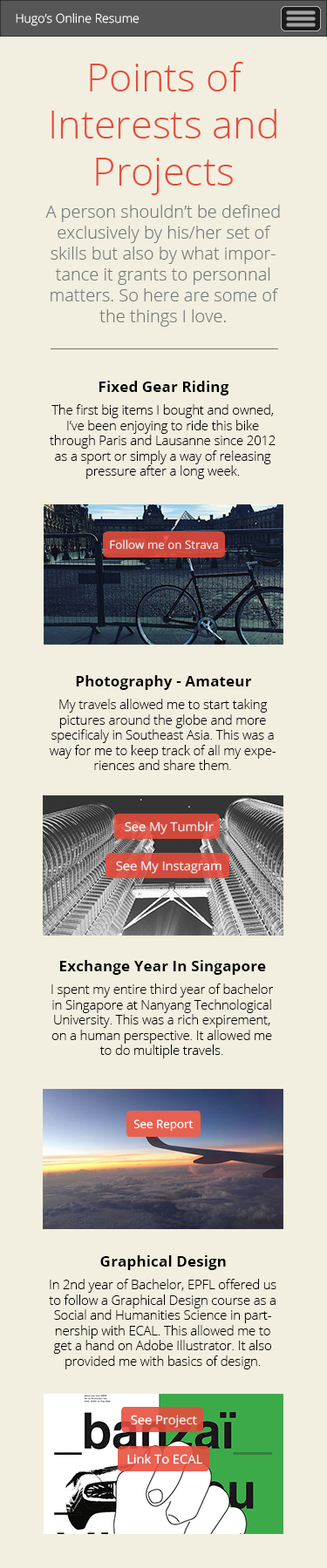
<style>
.page{position:relative;width:327px;height:1568px;background:#f2efe0}
.page>*{position:absolute;margin:0}
.t1{font:12.3px "OpenSans-Light";color:#ffffff}
.t2{font:39.2px "OpenSans-Light";color:#e74c3c}
.t3{font:17.4px "OpenSans-Light";color:#727878}
.t4{font:15.1px "OpenSans-Bold";color:#000000}
.t5{font:12.7px "OpenSans-Light";color:#000000}
.t6{font:11.4px "OpenSans";color:#e4e7ea}
.t7{font:12.2px "OpenSans";color:#e6e6e6;scale:1.05 1}
.t8{font:12.2px "OpenSans";color:#ffffff;scale:1.05 1}
.t9{font:11.4px "OpenSans";color:#ffffff}
</style>
<div class="page">
<p class="t1" style="left:16px;top:13px;width:123px;height:13px">Hugo’s Online Resume</p>
<p class="t2" style="left:51px;top:62px;width:225px;height:133px;text-align:center">Points of <br>Interests and Projects</p>
<p class="t3" style="left:45px;top:205px;width:235px;height:122px;text-align:center">A person shouldn’t be defined exclusively by his/her set of skills but also by what importance it grants to personnal matters. So here are some of the things I love.</p>
<p class="t4" style="left:99px;top:381px;width:130px;height:14px">Fixed Gear Riding</p>
<p class="t5" style="left:50px;top:404px;width:225px;height:75px;text-align:center">The first big items I bought and owned, I’ve been enjoying to ride this bike through Paris and Lausanne since 2012 as a sport or simply a way of releasing pressure after a long week.</p>
<p class="t6" style="left:110px;top:539px;width:108px;height:11px">Follow me on Strava</p>
<p class="t4" style="left:76px;top:675px;width:176px;height:15px">Photography - Amateur</p>
<p class="t5" style="left:49px;top:699px;width:226px;height:71px;text-align:center">My travels allowed me to start taking pictures around the globe and more specificaly in Southeast Asia. This was a way for me to keep track of all my experiences and share them.</p>
<p class="t7" style="left:125px;top:821px;width:88px;height:14px">See My Tumblr</p>
<p class="t8" style="left:116px;top:861px;width:105px;height:13px">See My Instagram</p>
<p class="t4" style="left:60px;top:960px;width:206px;height:15px">Exchange Year In Singapore</p>
<p class="t5" style="left:51px;top:983px;width:223px;height:75px;text-align:center">I spent my entire third year of bachelor in Singapore at Nanyang Technological University. This was a rich expirement, on a human perspective. It allowed me to do multiple travels.</p>
<p class="t9" style="left:133px;top:1119px;width:60px;height:13px">See Report</p>
<p class="t4" style="left:100px;top:1255px;width:126px;height:15px">Graphical Design</p>
<p class="t5" style="left:49px;top:1279px;width:227px;height:90px;text-align:center">In 2nd year of Bachelor, EPFL offered us to follow a Graphical Design course as a Social and Humanities Science in partnership with ECAL. This allowed me to get a hand on Adobe Illustrator. It also provided me with basics of design.</p>
<p class="t8" style="left:131px;top:1415px;width:66px;height:13px">See Project</p>
<p class="t8" style="left:127px;top:1454px;width:75px;height:10px">Link To ECAL</p>
</div>
